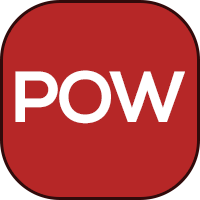
<style>
.page{position:relative;width:200px;height:200px;background:#b62727}
.page>*{position:absolute;margin:0}
.t1{font:72px "NexaBold";letter-spacing:-0.04em;color:#ffffff}
</style>
<div class="page">
<p class="t1" style="left:15px;top:70px;width:170px;height:54px">POW</p>
</div>
